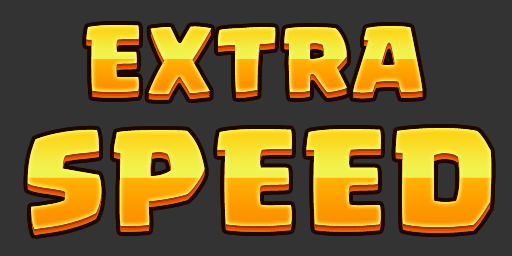
<style>
.page{position:relative;width:512px;height:256px;background:#333333}
.page>*{position:absolute;margin:0}
.t1{font:69.2px "Supercell-Magic";letter-spacing:0.06em}
.t2{font:97.7px "Supercell-Magic";letter-spacing:0.06em}
</style>
<div class="page">
<p class="t1" style="left:86px;top:25px;width:337px;height:69px">EXTRA</p>
<p class="t2" style="left:27px;top:128px;width:465px;height:101px">SPEED</p>
</div>
